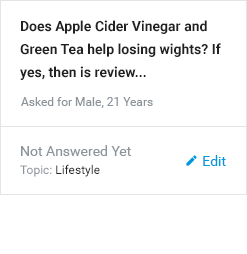
<style>
.page{position:relative;width:247px;height:254px;background:#ffffff}
.page>*{position:absolute;margin:0}
.t1{font:14px/23px "Roboto-Bold";color:#212121}
.t2{font:12px "Roboto-Regular";color:#8c9399}
.t3{font:14px "Roboto-Regular";color:#8c9399}
.t4{font:14px "Roboto-Regular";color:#0097db}
.t5{font:12px "Roboto-Regular";color:#212121}
</style>
<div class="page">
<p class="t1" style="left:20px;top:20px;width:201px;height:60px">Does Apple Cider Vinegar and Green Tea help losing wights? If yes, then is review...</p>
<p class="t2" style="left:21px;top:97px;width:132px;height:11px">Asked for Male, 21 Years</p>
<p class="t3" style="left:21px;top:145px;width:110px;height:11px">Not Answered Yet</p>
<p class="t4" style="left:203px;top:155px;width:23px;height:11px">Edit</p>
<p class="t5" style="left:20px;top:164px;width:80px;height:13px"><span class="t2">Topic: </span>Lifestyle</p>
</div>
